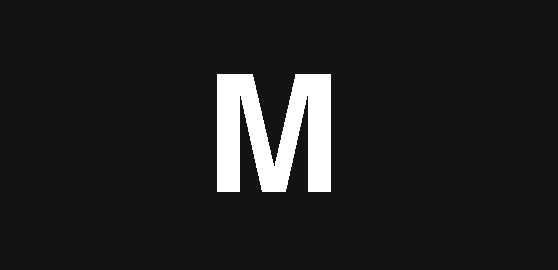
<style>
.page{position:relative;width:558px;height:270px;background:#131313}
.page>*{position:absolute;margin:0}
.t1{font:164.4px "Helvetica-Bold";letter-spacing:-0.04em;color:#ffffff}
</style>
<div class="page">
<p class="t1" style="left:217px;top:74px;width:114px;height:118px">M</p>
</div>
